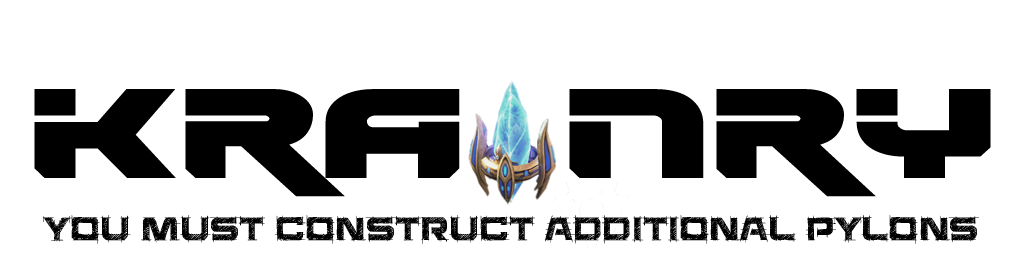
<style>
.page{position:relative;width:1024px;height:256px;background:#ffffff}
.page>*{position:absolute;margin:0}
.t1{font:140px "Renegado";letter-spacing:0.01em;color:#000000;scale:1.28 1}
.t2{font:38px "SaucerBB";letter-spacing:0.01em;color:#000000}
</style>
<div class="page">
<p class="t1" style="left:34px;top:89px;width:957px;height:108px">KRA NRY</p>
<p class="t2" style="left:42px;top:215px;width:937px;height:29px">You must construct additional Pylons</p>
</div>
